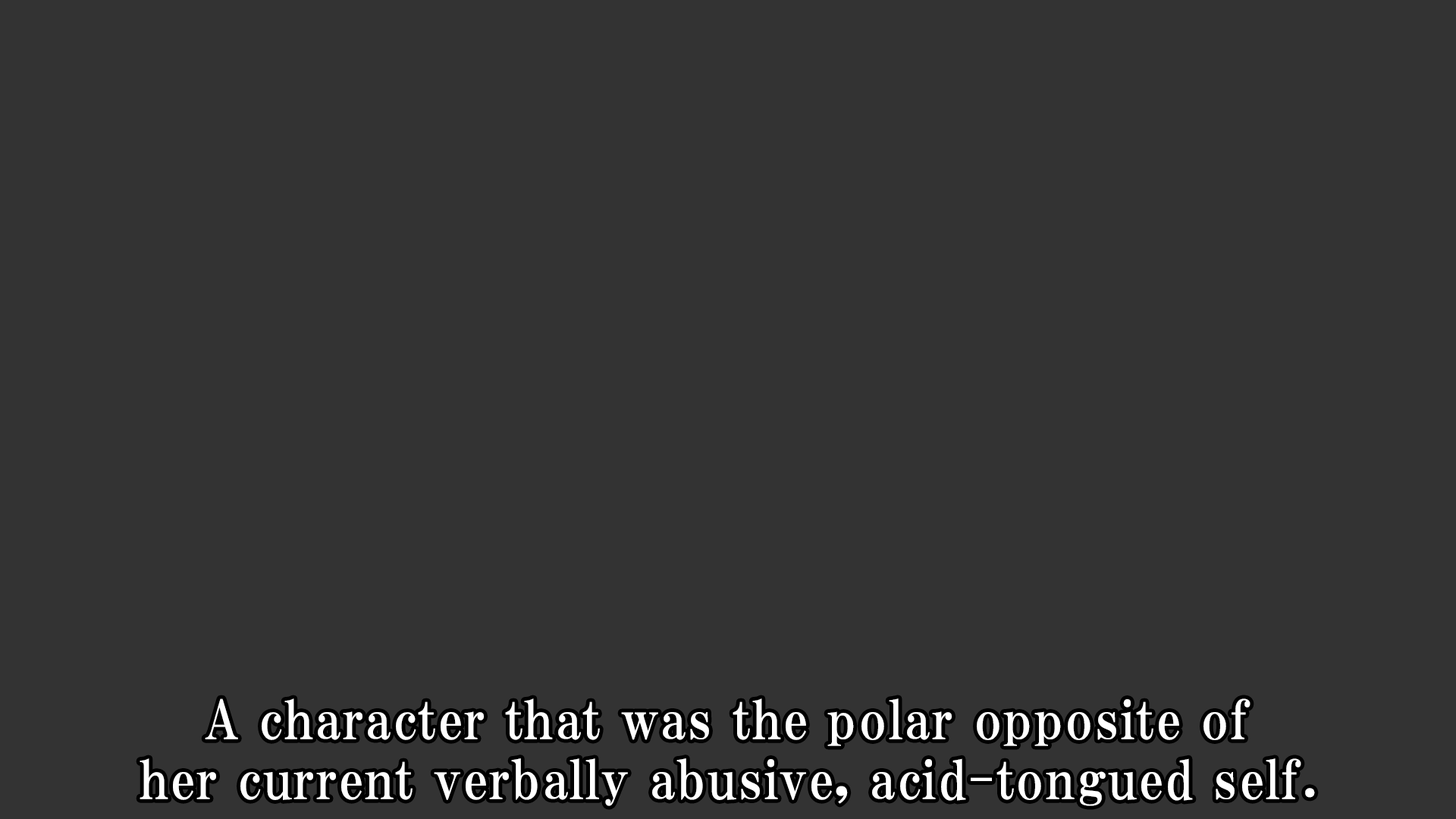
<style>
.page{position:relative;width:1456px;height:819px;background:#333333}
.page>*{position:absolute;margin:0}
.t1{font:53.1px/59.9px "HGPMinchoE";letter-spacing:0.025em;color:#ffffff}
</style>
<div class="page">
<p class="t1" style="left:140px;top:698px;width:1175px;height:108px;text-align:center">A character that was the polar opposite of<br>her current verbally abusive, acid-tongued self.</p>
</div>
